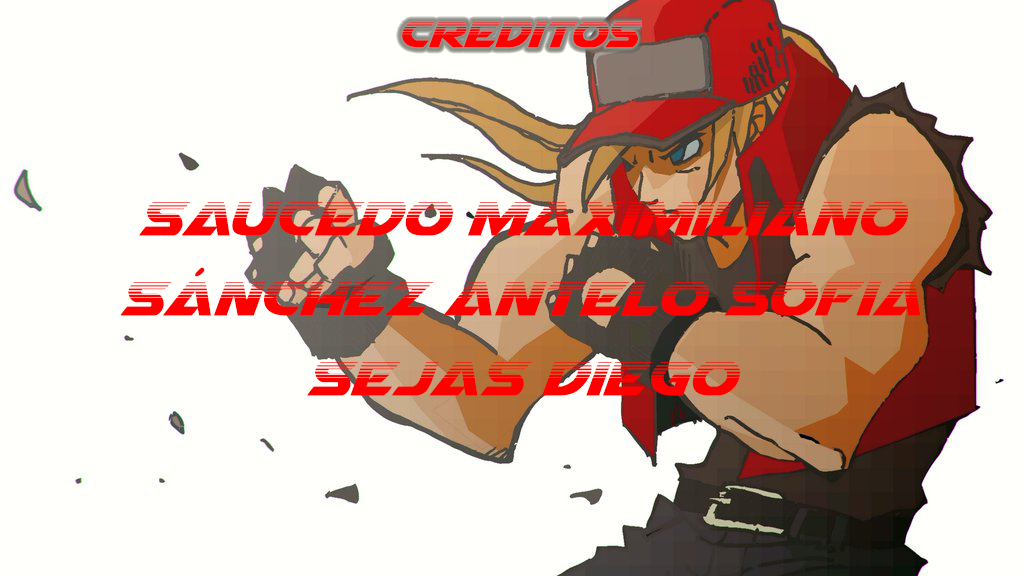
<style>
.page{position:relative;width:1024px;height:576px;background:#fffffb}
.page>*{position:absolute;margin:0}
.t1{font:66.7px "AirstrikeHalf-Tone";color:#ff0000}
</style>
<div class="page">
<p class="t1" style="left:120px;top:202px;width:801px;height:194px;text-align:center">Saucedo Maximiliano<br>Sánchez Antelo Sofia<br>Sejas Diego</p>
</div>
